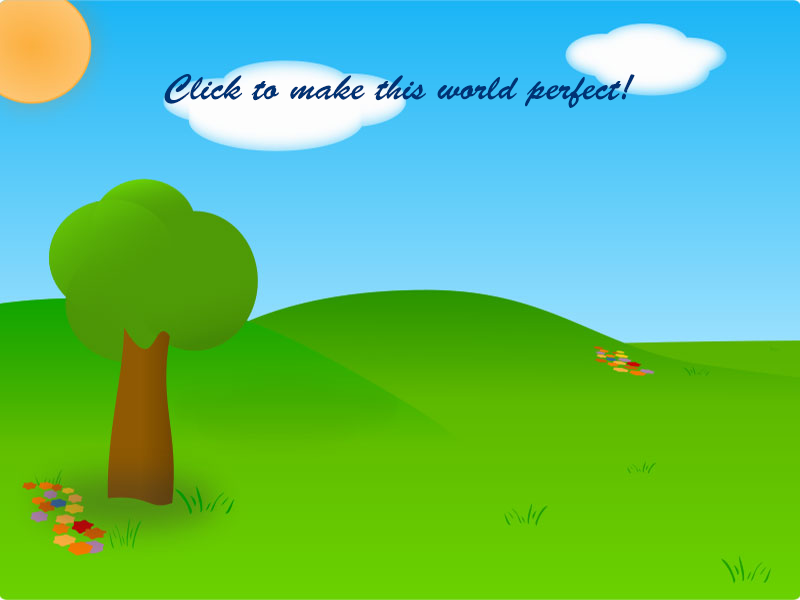
<style>
.page{position:relative;width:800px;height:600px}
.page>*{position:absolute;margin:0}
.t1{font:36px "BrushScriptStd";color:#013274}
</style>
<div class="page">
<p class="t1" style="left:164px;top:74px;width:471px;height:34px">Click to make this world perfect!</p>
</div>
